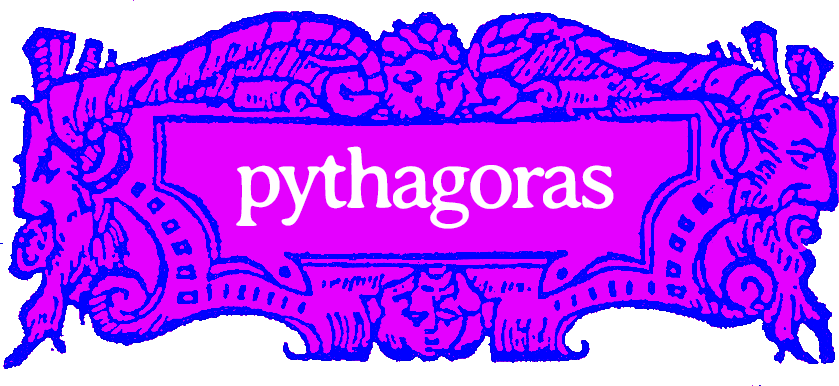
<style>
.page{position:relative;width:839px;height:386px;background:#e400ff}
.page>*{position:absolute;margin:0}
.t1{font:90.5px "AveriaSerif-Regular";letter-spacing:-0.075em;color:#ffffff}
</style>
<div class="page">
<p class="t1" style="left:236px;top:146px;width:378px;height:83px">pythagoras</p>
</div>
